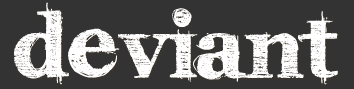
<style>
.page{position:relative;width:354px;height:89px;background:#333333}
.page>*{position:absolute;margin:0}
.t1{font:120px "karabinE.";color:#ffffff}
</style>
<div class="page">
<p class="t1" style="left:14px;top:2px;width:324px;height:83px">deviant</p>
</div>
